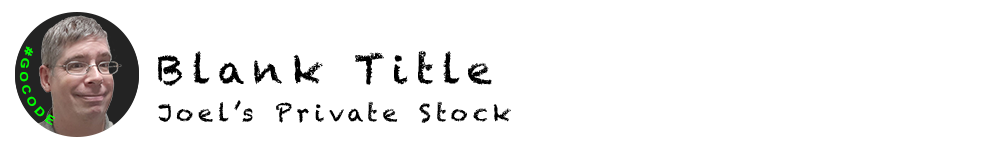
<style>
.page{position:relative;width:1000px;height:150px;background:#ffffff}
.page>*{position:absolute;margin:0}
.t1{font:11.2px "Arial-BoldMT";letter-spacing:0.2em;color:#00ff00}
.t2{font:40px "Chalkduster";letter-spacing:0.2em;color:#000000}
.t3{font:24px "Chalkduster";letter-spacing:0.2em;color:#000000}
</style>
<div class="page">
<p class="t1" style="left:19px;top:46px;width:37px;height:80px;rotate:72deg">#GOCODE</p>
<p class="t2" style="left:157px;top:50px;width:335px;height:36px">Blank Title</p>
<p class="t3" style="left:158px;top:100px;width:353px;height:23px">Joel’s Private Stock</p>
</div>
